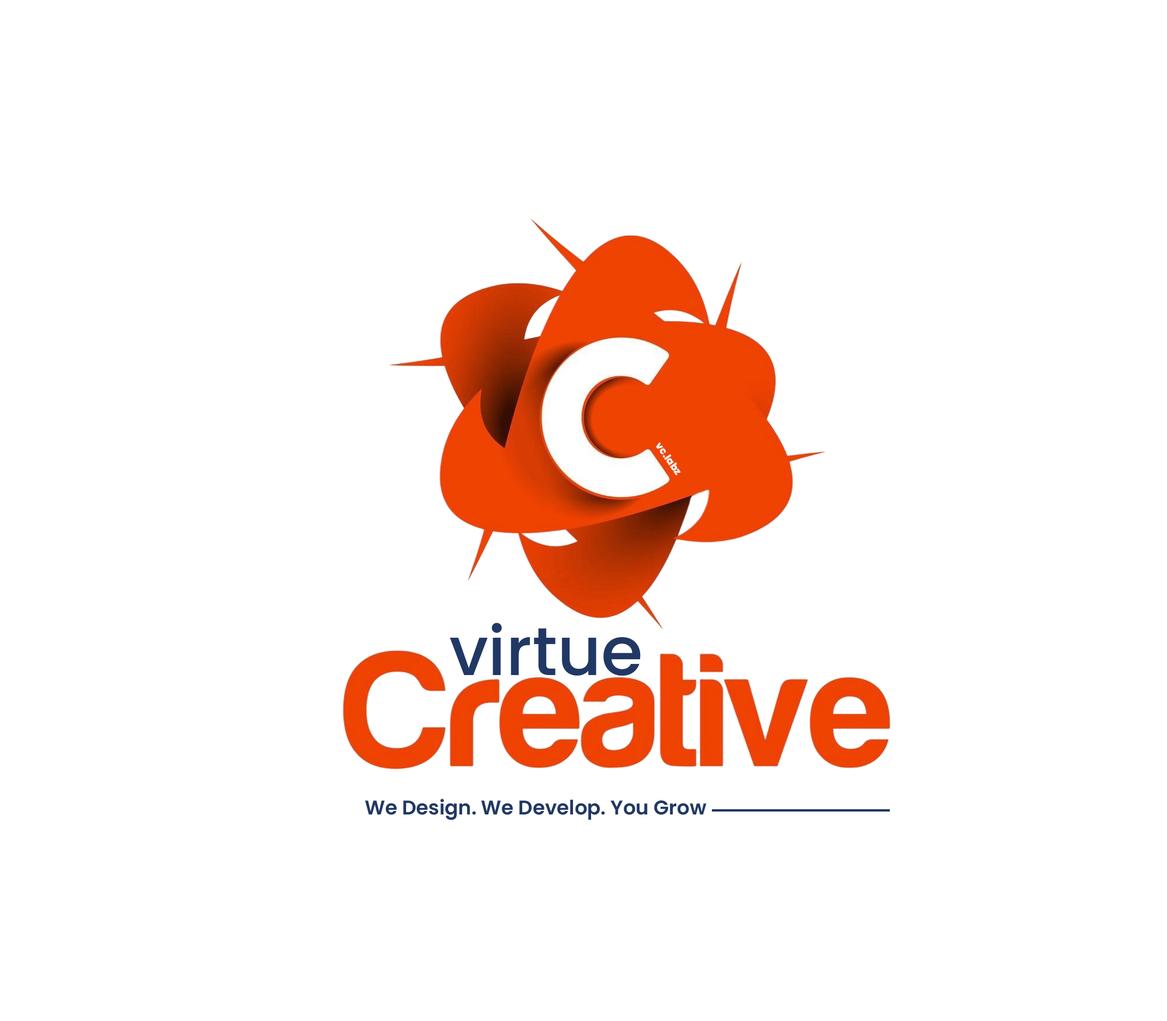
<style>
.page{position:relative;width:1167px;height:1021px;background:#ffffff}
.page>*{position:absolute;margin:0}
.t1{font:9.9px "Poppins-ExtraBold";color:#ffffff}
.t2{font:67.7px "Poppins-Medium";color:#213864}
.t3{font:19.8px "Poppins-SemiBold";color:#213864}
</style>
<div class="page">
<p class="t1" style="left:656px;top:442px;width:25px;height:34px;rotate:55deg">vc.labz</p>
<p class="t2" style="left:450px;top:623px;width:191px;height:53px">virtue</p>
<p class="t3" style="left:365px;top:799px;width:342px;height:22px">We Design. We Develop. You Grow</p>
</div>
